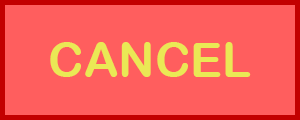
<style>
.page{position:relative;width:300px;height:120px;background:#ff5e5e}
.page>*{position:absolute;margin:0}
.t1{font:48px "ArialRoundedMTBold";color:#eae855}
</style>
<div class="page">
<p class="t1" style="left:50px;top:42px;width:201px;height:35px">CANCEL</p>
</div>
